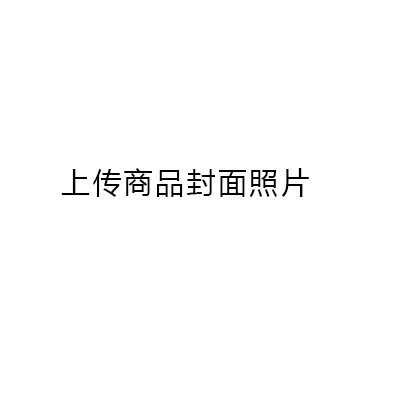
<style>
.page{position:relative;width:400px;height:400px;background:#ffffff}
.page>*{position:absolute;margin:0}
.t1{font:30px "MicrosoftYaHei";letter-spacing:0.1em;color:#000000;text-transform:uppercase;scale:0.95 1}
</style>
<div class="page">
<p class="t1" style="left:61px;top:168px;width:248px;height:29px">上传商品封面照片</p>
</div>
